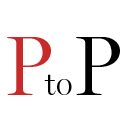
<style>
.page{position:relative;width:128px;height:128px;background:#ffffff}
.page>*{position:absolute;margin:0}
.t1{font:85.5px "MillerDisplay-Light";letter-spacing:0.2em;color:#c82a2a}
.t2{font:85.5px "MillerDisplay-Light";letter-spacing:0.2em;color:#000000}
.t3{font:33.3px "MillerDisplay-Light";color:#000000}
</style>
<div class="page">
<p class="t1" style="left:7px;top:37px;width:44px;height:58px">P</p>
<p class="t2" style="left:76px;top:37px;width:44px;height:58px">P</p>
<p class="t3" style="left:44px;top:74px;width:28px;height:21px">to</p>
</div>
